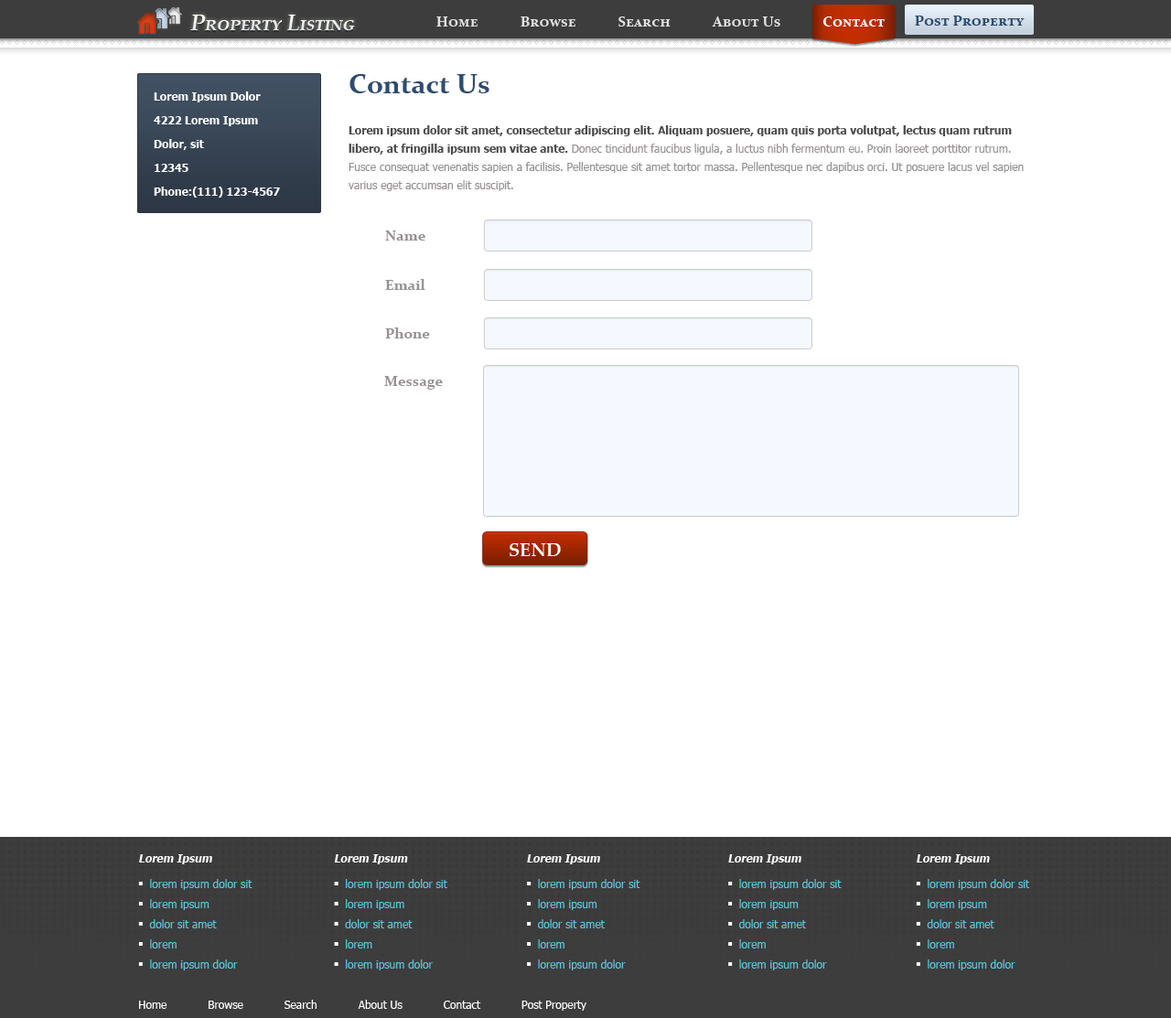
<style>
.page{position:relative;width:1171px;height:1018px;background:#ffffff}
.page>*{position:absolute;margin:0}
.t1{font:22px "PalatinoLinotype-BoldItalic";color:#e8f1fc;font-variant:small-caps}
.t2{font:14.6px "Constantia-Bold";color:#e2e1e1;font-variant:small-caps}
.t3{font:14.6px "Constantia-Bold";color:#ffffff;font-variant:small-caps}
.t4{font:14.6px "Constantia-Bold";color:#2e4c6e;font-variant:small-caps}
.t5{font:27.4px "Constantia-Bold";color:#2e4c6e}
.t6{font:11px/23.8px "Tahoma-Bold";color:#ffffff}
.t7{font:11px/18.3px "Tahoma";color:#969191}
.t8{font:11px/18.3px "Tahoma-Bold";color:#4c4a4a}
.t9{font:14.6px "Constantia-Bold";color:#969191}
.t10{font:18.3px "PalatinoLinotype-Bold";color:#ffffff;text-transform:uppercase}
.t11{font:11px/20.1px "Tahoma";color:#5ac8e0}
.t12{font:11px/22px "Tahoma-Bold";color:#fefefe;font-style:italic}
.t13{font:11px/25.6px "Tahoma-Bold";color:#fefefe;font-style:italic}
.t14{font:6.4px/25.6px "Wingdings-Regular";color:#ffffff}
.t15{font:6.4px/20.1px "Wingdings-Regular";color:#ffffff}
.t16{font:11px "Tahoma";color:#ffffff}
</style>
<div class="page">
<p class="t1" style="left:190px;top:15px;width:165px;height:15px">Property Listing</p>
<p class="t2" style="left:436px;top:16px;width:449px;height:11px">Home            Browse            Search            About Us            <span class="t3">Contact</span></p>
<p class="t4" style="left:915px;top:16px;width:110px;height:10px">Post Property</p>
<p class="t5" style="left:349px;top:74px;width:140px;height:19px">Contact Us</p>
<p class="t6" style="left:154px;top:91px;width:126px;height:107px">Lorem Ipsum Dolor<br>4222 Lorem Ipsum<br>Dolor, sit<br>12345<br>Phone:(111) 123-4567</p>
<p class="t7" style="left:349px;top:125px;width:675px;height:66px"><span class="t8">Lorem ipsum dolor sit amet, consectetur adipiscing elit. Aliquam posuere, quam quis porta volutpat, lectus quam rutrum libero, at fringilla ipsum sem vitae ante. </span>Donec tincidunt faucibus ligula, a luctus nibh fermentum eu. Proin laoreet porttitor rutrum. Fusce consequat venenatis sapien a facilisis. Pellentesque sit amet tortor massa. Pellentesque nec dapibus orci. Ut posuere lacus vel sapien varius eget accumsan elit suscipit.</p>
<p class="t9" style="left:385px;top:231px;width:40px;height:10px">Name</p>
<p class="t9" style="left:385px;top:279px;width:40px;height:11px">Email</p>
<p class="t9" style="left:385px;top:328px;width:45px;height:11px">Phone</p>
<p class="t9" style="left:384px;top:376px;width:59px;height:14px">Message</p>
<p class="t10" style="left:510px;top:543px;width:51px;height:13px">Send</p>
<p class="t11" style="left:138px;top:854px;width:115px;height:117px"><span class="t12">Lorem Ips</span><span class="t13">um<br></span><span class="t14">n </span>lorem ipsum dolor sit<br><span class="t15">n </span>lorem ipsum<br><span class="t15">n </span>dolor sit amet<br><span class="t15">n </span>lorem<br><span class="t15">n </span>lorem ipsum dolor</p>
<p class="t11" style="left:334px;top:854px;width:113px;height:117px"><span class="t12">Lorem Ips</span><span class="t13">um<br></span><span class="t14">n </span>lorem ipsum dolor sit<br><span class="t15">n </span>lorem ipsum<br><span class="t15">n </span>dolor sit amet<br><span class="t15">n </span>lorem<br><span class="t15">n </span>lorem ipsum dolor</p>
<p class="t11" style="left:527px;top:854px;width:113px;height:117px"><span class="t12">Lorem Ips</span><span class="t13">um<br></span><span class="t14">n </span>lorem ipsum dolor sit<br><span class="t15">n </span>lorem ipsum<br><span class="t15">n </span>dolor sit amet<br><span class="t15">n </span>lorem<br><span class="t15">n </span>lorem ipsum dolor</p>
<p class="t11" style="left:728px;top:854px;width:114px;height:117px"><span class="t12">Lorem Ips</span><span class="t13">um<br></span><span class="t14">n </span>lorem ipsum dolor sit<br><span class="t15">n </span>lorem ipsum<br><span class="t15">n </span>dolor sit amet<br><span class="t15">n </span>lorem<br><span class="t15">n </span>lorem ipsum dolor</p>
<p class="t11" style="left:916px;top:854px;width:114px;height:117px"><span class="t12">Lorem Ips</span><span class="t13">um<br></span><span class="t14">n </span>lorem ipsum dolor sit<br><span class="t15">n </span>lorem ipsum<br><span class="t15">n </span>dolor sit amet<br><span class="t15">n </span>lorem<br><span class="t15">n </span>lorem ipsum dolor</p>
<p class="t16" style="left:139px;top:1000px;width:447px;height:11px">Home            Browse            Search            About Us            Contact            Post Property</p>
</div>
